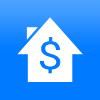
<style>
.page{position:relative;width:100px;height:100px;background:#007aff}
.page>*{position:absolute;margin:0}
.t1{font:39px "Roboto-Regular";color:#007aff;scale:1.15 1}
</style>
<div class="page">
<p class="t1" style="left:40px;top:37px;width:21px;height:37px">$</p>
</div>
